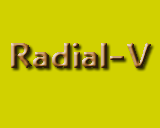
<style>
.page{position:relative;width:160px;height:128px;background:#d1d100}
.page>*{position:absolute;margin:0}
.t1{font:32px "EstelleBlackSF";color:#ae722c;scale:1.36 1}
</style>
<div class="page">
<p class="t1" style="left:11px;top:43px;width:140px;height:25px">Radial-V</p>
</div>
